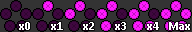
<style>
.page{position:relative;width:192px;height:32px;background:#333333}
.page>*{position:absolute;margin:0}
.t1{font:12px "Calibri-Bold";color:#ffffff}
</style>
<div class="page">
<p class="t1" style="left:19px;top:22px;width:11px;height:8px">x0</p>
<p class="t1" style="left:51px;top:22px;width:12px;height:8px">x1</p>
<p class="t1" style="left:83px;top:22px;width:11px;height:8px">x2</p>
<p class="t1" style="left:115px;top:22px;width:11px;height:8px">x3</p>
<p class="t1" style="left:147px;top:22px;width:12px;height:8px">x4</p>
<p class="t1" style="left:169px;top:22px;width:21px;height:8px">Max</p>
</div>
